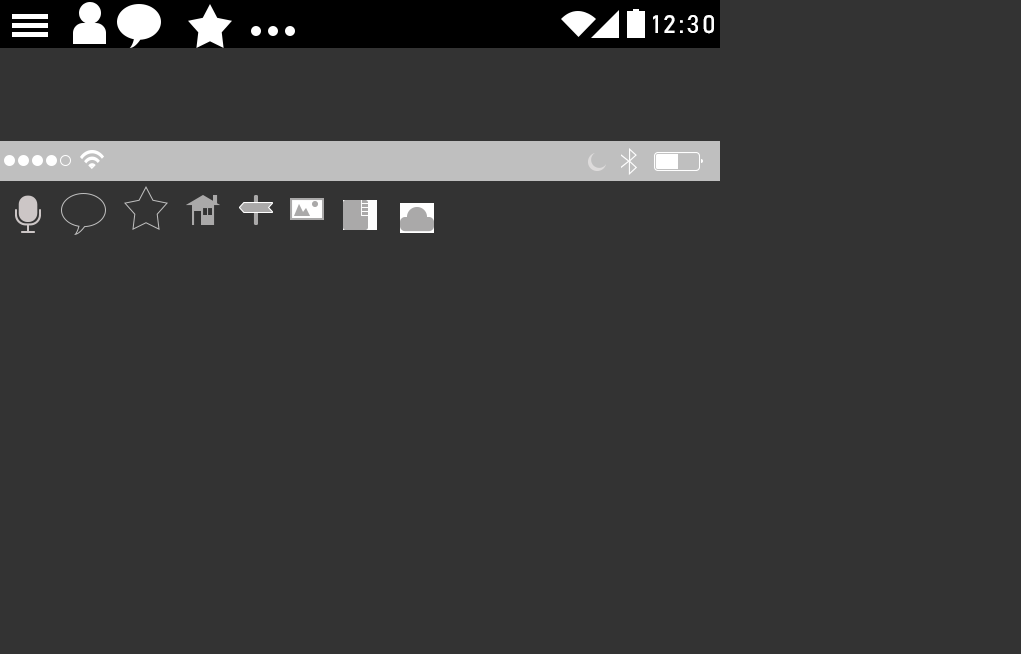
<style>
.page{position:relative;width:1021px;height:654px;background:#333333}
.page>*{position:absolute;margin:0}
.t1{font:25px "Bahnschrift";letter-spacing:0.1em;color:#ffffff}
</style>
<div class="page">
<p class="t1" style="left:653px;top:15px;width:61px;height:19px">12:30</p>
</div>
